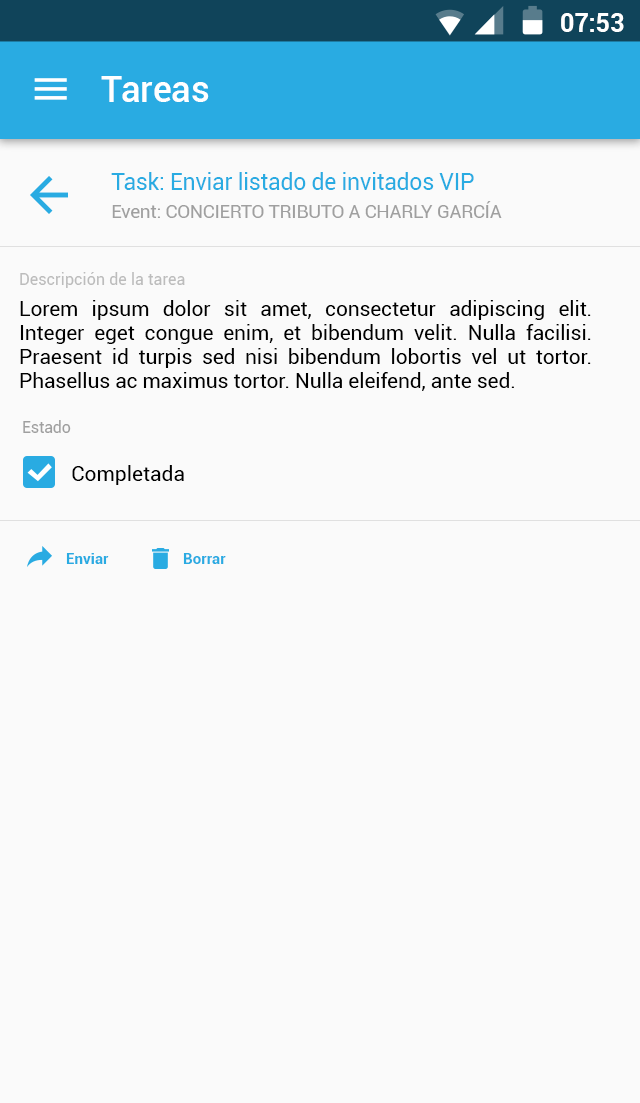
<style>
.page{position:relative;width:640px;height:1103px;background:#fafafa}
.page>*{position:absolute;margin:0}
.t1{font:24.9px "Roboto-Bold";color:#ffffff}
.t2{font:35.8px "Roboto-Medium";letter-spacing:0.005em;color:#ffffff}
.t3{font:22.9px "Roboto-Regular";letter-spacing:-0.01em;color:#29abe2}
.t4{font:18.7px "Roboto-Regular";letter-spacing:-0.01em;color:#9f9f9f}
.t5{font:15.5px "Roboto-Regular";letter-spacing:0.02em;color:#bcbcbc}
.t6{font:20.7px/24px "Roboto-Regular";color:#000000}
.t7{font:16px "Roboto-Regular";letter-spacing:-0.01em;color:#9f9f9f}
.t8{font:21px "Roboto-Regular";color:#000000}
.t9{font:14.8px "Roboto-Bold";letter-spacing:0.01em;color:#29abe2}
</style>
<div class="page">
<p class="t1" style="left:561px;top:13px;width:63px;height:19px">07:53</p>
<p class="t2" style="left:101px;top:76px;width:108px;height:26px">Tareas</p>
<p class="t3" style="left:111px;top:172px;width:363px;height:18px">Task: Enviar listado de invitados VIP</p>
<p class="t4" style="left:112px;top:201px;width:390px;height:17px">Event: CONCIERTO TRIBUTO A CHARLY GARCÍA</p>
<p class="t5" style="left:20px;top:272px;width:165px;height:16px">Descripción de la tarea</p>
<p class="t6" style="left:20px;top:300px;width:571px;height:91px;text-align:justify">Lorem ipsum dolor sit amet, consectetur adipiscing elit. Integer eget congue enim, et bibendum velit. Nulla facilisi. Praesent id turpis sed nisi bibendum lobortis vel ut tortor. Phasellus ac maximus tortor. Nulla eleifend, ante sed.</p>
<p class="t7" style="left:23px;top:420px;width:48px;height:13px">Estado</p>
<p class="t8" style="left:72px;top:465px;width:112px;height:20px">Completada</p>
<p class="t9" style="left:66px;top:553px;width:43px;height:11px">Enviar</p>
<p class="t9" style="left:183px;top:553px;width:43px;height:11px">Borrar</p>
</div>
